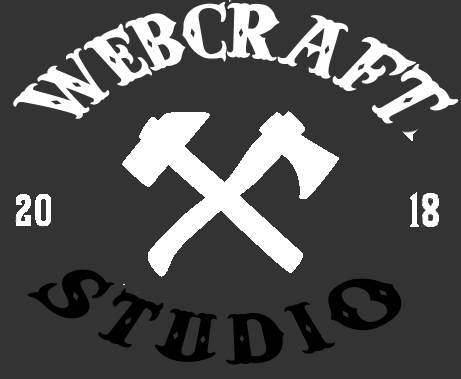
<style>
.page{position:relative;width:461px;height:379px;background:#333333}
.page>*{position:absolute;margin:0}
.t1{font:60px/33px "AndersonFourFeatherFalls";color:#ffffff}
.t2{font:60px "AndersonFourFeatherFalls";letter-spacing:0.1em;color:#000000;scale:1.2 1}
</style>
<div class="page">
<p class="t1" style="left:13px;top:1px;width:446px;height:123px;text-align:justify">WEBCRAFT</p>
<p class="t2" style="left:27px;top:269px;width:375px;height:96px">STUDIO</p>
</div>
